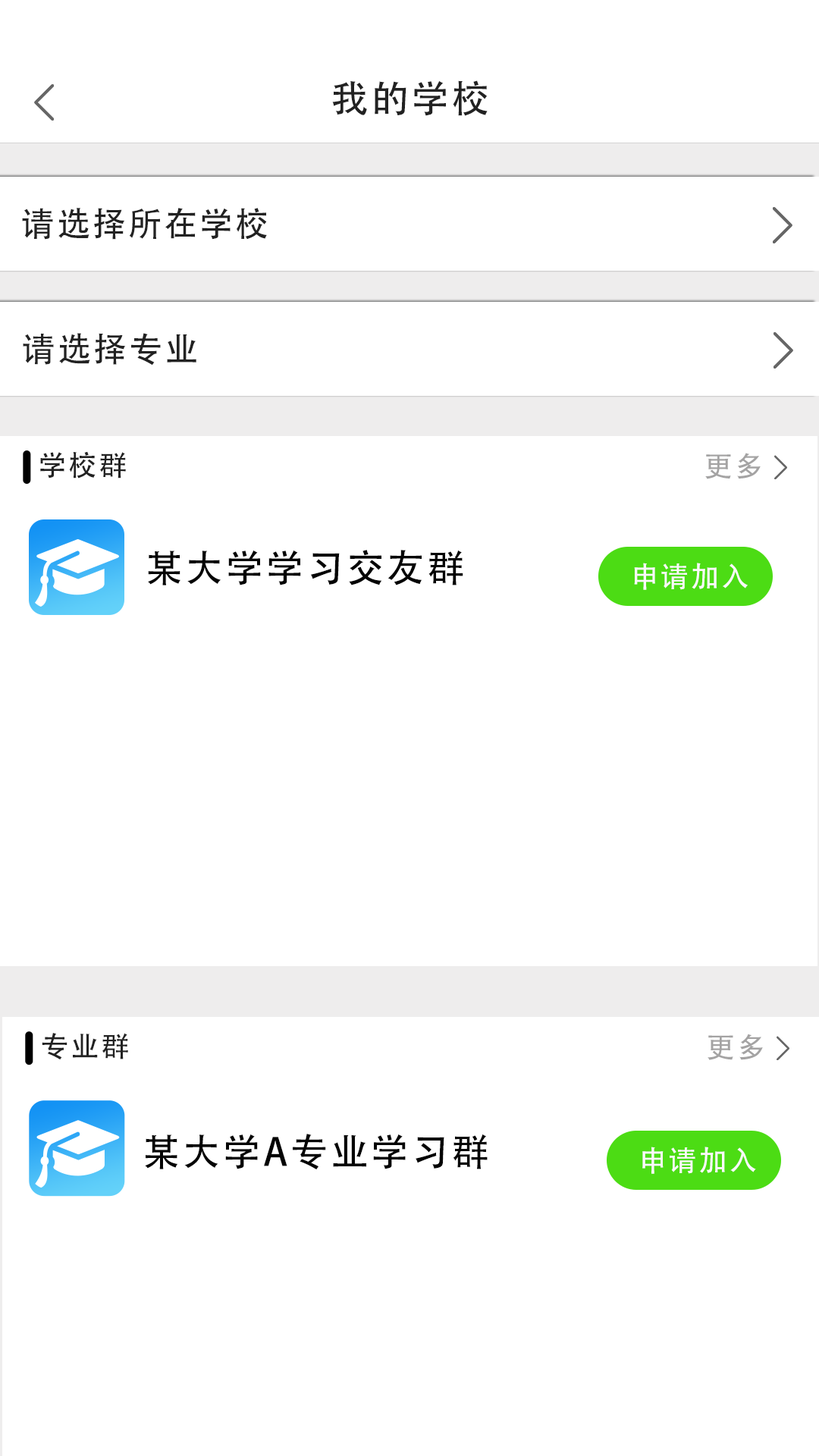
<style>
.page{position:relative;width:819px;height:1456px;background:#ffffff}
.page>*{position:absolute;margin:0}
.t1{font:37.9px "AdobeHeitiStd-Regular";letter-spacing:0.06em;color:#222222}
.t2{font:33.7px "AdobeHeitiStd-Regular";letter-spacing:0.06em;color:#222222}
.t3{font:28.4px "AdobeHeitiStd-Regular";letter-spacing:0.06em;color:#222222}
.t4{font:28.4px "AdobeHeitiStd-Regular";letter-spacing:0.06em;color:#a4a3a3}
.t5{font:37.9px "AdobeHeitiStd-Regular";letter-spacing:0.06em;color:#040404}
.t6{font:28.4px "AdobeHeitiStd-Regular";letter-spacing:0.06em;color:#fcf9f9}
</style>
<div class="page">
<p class="t1" style="left:332px;top:80px;width:156px;height:36px">我的学校</p>
<p class="t2" style="left:22px;top:208px;width:245px;height:32px">请选择所在学校</p>
<p class="t2" style="left:23px;top:333px;width:173px;height:33px">请选择专业</p>
<p class="t3" style="left:40px;top:451px;width:86px;height:28px">学校群</p>
<p class="t4" style="left:705px;top:453px;width:56px;height:26px">更多</p>
<p class="t5" style="left:148px;top:550px;width:315px;height:35px">某大学学习交友群</p>
<p class="t6" style="left:634px;top:563px;width:114px;height:27px">申请加入</p>
<p class="t3" style="left:42px;top:1033px;width:86px;height:27px">专业群</p>
<p class="t4" style="left:708px;top:1034px;width:55px;height:26px">更多</p>
<p class="t5" style="left:145px;top:1134px;width:343px;height:36px">某大学A专业学习群</p>
<p class="t6" style="left:642px;top:1147px;width:114px;height:27px">申请加入</p>
</div>
